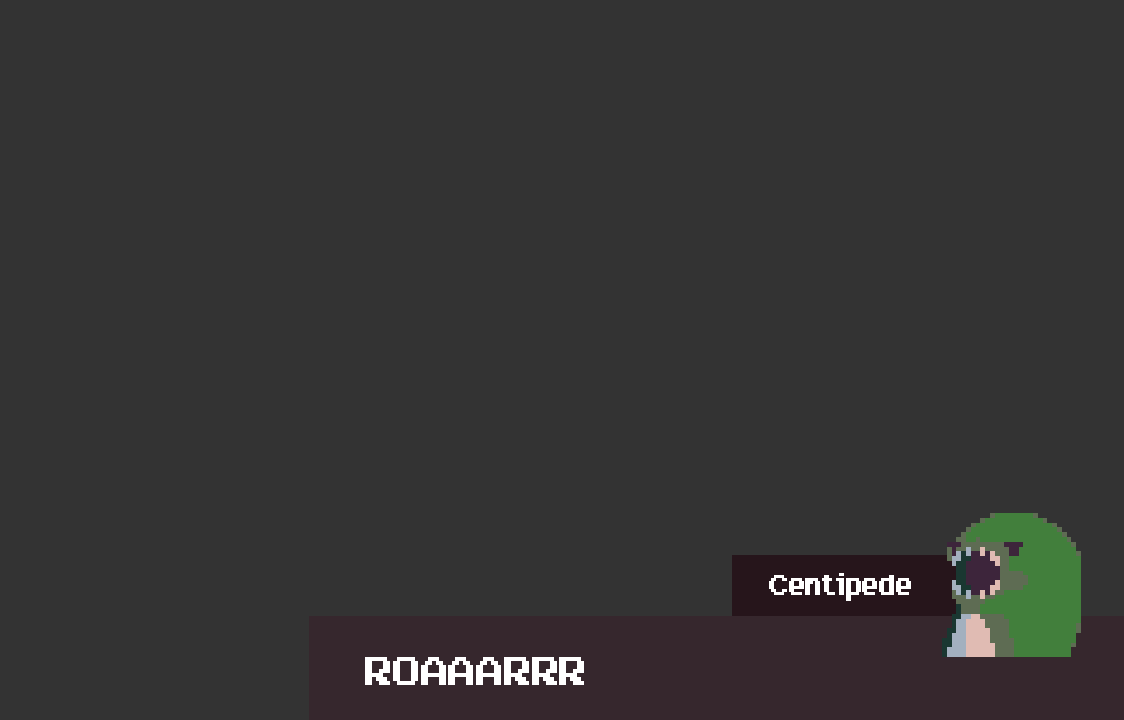
<style>
.page{position:relative;width:1124px;height:720px;background:#333333}
.page>*{position:absolute;margin:0}
.t1{font:27.8px "Arcadepix";letter-spacing:-0.03em;color:#ffffff;scale:0.9 1}
.t2{font:40px "Arcadepix";letter-spacing:-0.03em;color:#ffffff;scale:0.9 1}
</style>
<div class="page">
<p class="t1" style="left:769px;top:573px;width:142px;height:28px">Centipede</p>
<p class="t2" style="left:365px;top:657px;width:219px;height:28px">ROAAARRR</p>
</div>
